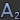
<style>
.page{position:relative;width:20px;height:20px;background:#333333}
.page>*{position:absolute;margin:0}
.t1{font:19px "LucidaGrande";letter-spacing:-0.025em;color:#8293be}
.t2{font:9px "LucidaGrande";letter-spacing:-0.025em}
</style>
<div class="page">
<p class="t1" style="left:0px;top:3px;width:14px;height:14px">A</p>
<p class="t2" style="left:14px;top:12px;width:5px;height:7px">2</p>
</div>
